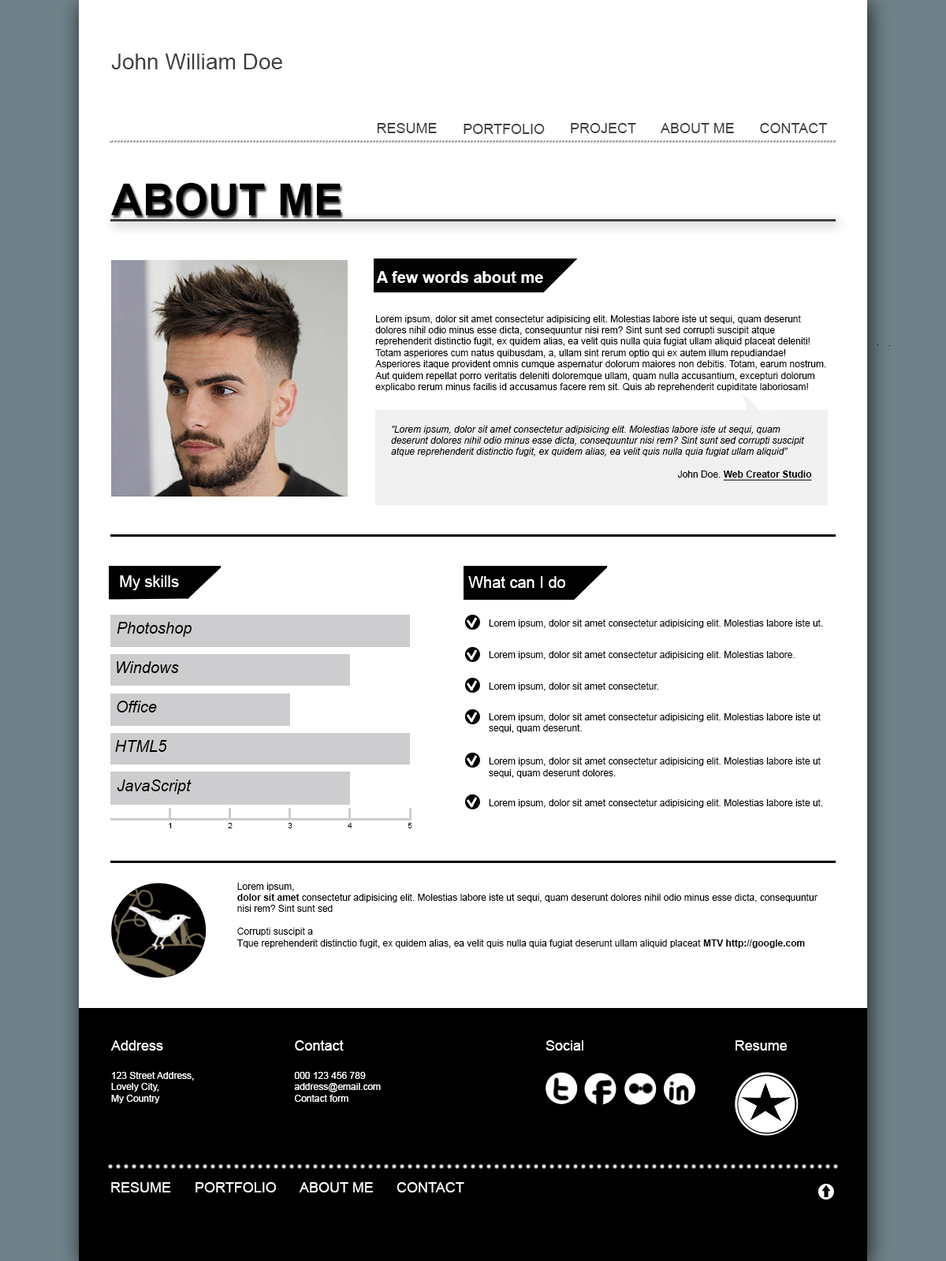
<style>
.page{position:relative;width:946px;height:1261px;background:#ffffff}
.page>*{position:absolute;margin:0}
.t1{font:22.1px "ArialMT";color:#3f3f3f}
.t2{font:14.2px "ArialMT";color:#3f3f3f}
.t3{font:43.3px "Arial-BoldMT";color:#000000}
.t4{font:15.8px "Arial-BoldMT";color:#ffffff}
.t5{font:9.5px "ArialMT";color:#000000}
.t6{font:9.5px "Arial-ItalicMT";color:#000000}
.t7{font:9.5px "Arial-BoldMT";color:#000000;text-decoration:underline}
.t8{font:15.8px "ArialMT";color:#ffffff}
.t9{font:15.8px "Arial-ItalicMT";color:#000000}
.t10{font:7.9px "ArialMT";color:#000000}
.t11{font:9.5px "Arial-BoldMT";color:#000000}
.t12{font:9.5px "ArialMT";color:#ffffff}
.t13{font:14.2px "ArialMT";color:#ffffff}
</style>
<div class="page">
<p class="t1" style="left:111px;top:54px;width:171px;height:15px">John William Doe</p>
<p class="t2" style="left:377px;top:123px;width:60px;height:10px">RESUME</p>
<p class="t2" style="left:463px;top:124px;width:82px;height:10px">PORTFOLIO</p>
<p class="t2" style="left:571px;top:123px;width:65px;height:10px">PROJECT</p>
<p class="t2" style="left:660px;top:123px;width:74px;height:10px">ABOUT ME</p>
<p class="t2" style="left:760px;top:123px;width:67px;height:10px">CONTACT</p>
<p class="t3" style="left:111px;top:183px;width:229px;height:33px">ABOUT ME</p>
<p class="t4" style="left:376px;top:271px;width:167px;height:12px">A few words about me</p>
<p class="t5" style="left:375px;top:315px;width:451px;height:77px">Lorem ipsum, dolor sit amet consectetur adipisicing elit. Molestias labore iste ut sequi, quam deserunt dolores nihil odio minus esse dicta, consequuntur nisi rem? Sint sunt sed corrupti suscipit atque reprehenderit distinctio fugit, ex quidem alias, ea velit quis nulla quia fugiat ullam aliquid placeat deleniti! Totam asperiores cum natus quibusdam, a, ullam sint rerum optio qui ex autem illum repudiandae! Asperiores itaque provident omnis cumque aspernatur dolorum maiores non debitis. Totam, earum nostrum. Aut quidem repellat porro veritatis deleniti doloremque ullam, quam nulla accusantium, excepturi dolorum explicabo rerum minus facilis id accusamus facere rem sit. Quis ab reprehenderit cupiditate laboriosam!</p>
<p class="t6" style="left:391px;top:426px;width:421px;height:55px">“Lorem ipsum, dolor sit amet consectetur adipisicing elit. Molestias labore iste ut sequi, quam deserunt dolores nihil odio minus esse dicta, consequuntur nisi rem? Sint sunt sed corrupti suscipit atque reprehenderit distinctio fugit, ex quidem alias, ea velit quis nulla quia fugiat ullam aliquid”<br><span class="t5"><br>John Doe. </span><span class="t7">Web Creator Studio</span></p>
<p class="t8" style="left:120px;top:575px;width:59px;height:15px">My skills</p>
<p class="t8" style="left:468px;top:576px;width:97px;height:12px">What can I do</p>
<p class="t9" style="left:117px;top:622px;width:75px;height:15px">Photoshop</p>
<p class="t5" style="left:489px;top:619px;width:334px;height:9px">Lorem ipsum, dolor sit amet consectetur adipisicing elit. Molestias labore iste ut.</p>
<p class="t5" style="left:489px;top:651px;width:305px;height:9px">Lorem ipsum, dolor sit amet consectetur adipisicing elit. Molestias labore.</p>
<p class="t9" style="left:117px;top:661px;width:62px;height:12px">Windows</p>
<p class="t5" style="left:489px;top:682px;width:170px;height:9px">Lorem ipsum, dolor sit amet consectetur.</p>
<p class="t9" style="left:117px;top:701px;width:40px;height:11px">Office</p>
<p class="t5" style="left:489px;top:713px;width:331px;height:20px">Lorem ipsum, dolor sit amet consectetur adipisicing elit. Molestias labore iste ut sequi, quam deserunt.</p>
<p class="t9" style="left:115px;top:740px;width:52px;height:12px">HTML5</p>
<p class="t5" style="left:489px;top:757px;width:331px;height:21px">Lorem ipsum, dolor sit amet consectetur adipisicing elit. Molestias labore iste ut sequi, quam deserunt dolores.</p>
<p class="t9" style="left:117px;top:779px;width:75px;height:15px">JavaScript</p>
<p class="t5" style="left:489px;top:799px;width:334px;height:9px">Lorem ipsum, dolor sit amet consectetur adipisicing elit. Molestias labore iste ut.</p>
<p class="t10" style="left:169px;top:823px;width:3px;height:5px">1</p>
<p class="t10" style="left:228px;top:823px;width:4px;height:5px">2</p>
<p class="t10" style="left:288px;top:823px;width:4px;height:5px">3</p>
<p class="t10" style="left:348px;top:823px;width:4px;height:5px">4</p>
<p class="t10" style="left:407px;top:823px;width:5px;height:5px">5</p>
<p class="t5" style="left:236px;top:883px;width:581px;height:65px">Lorem ipsum, <br><span class="t11">dolor sit amet </span>consectetur adipisicing elit. Molestias labore iste ut sequi, quam deserunt dolores nihil odio minus esse dicta, consequuntur nisi rem? Sint sunt sed <br><br>Corrupti suscipit a<br>Tque reprehenderit distinctio fugit, ex quidem alias, ea velit quis nulla quia fugiat deserunt ullam aliquid placeat <span class="t11">MTV http://google.com</span></p>
<p class="t12" style="left:110px;top:1040px;width:84px;height:63px"><span class="t13">Address<br><br></span>123 Street Address,<br>Lovely City,<br>My Country</p>
<p class="t12" style="left:294px;top:1040px;width:87px;height:62px"><span class="t13">Contact<br><br></span>000 123 456 789<br>address@email.com<br>Contact form</p>
<p class="t13" style="left:545px;top:1040px;width:38px;height:11px">Social</p>
<p class="t13" style="left:735px;top:1040px;width:52px;height:11px">Resume</p>
<p class="t13" style="left:111px;top:1182px;width:60px;height:10px">RESUME</p>
<p class="t13" style="left:195px;top:1182px;width:81px;height:10px">PORTFOLIO</p>
<p class="t13" style="left:299px;top:1182px;width:74px;height:10px">ABOUT ME</p>
<p class="t13" style="left:396px;top:1182px;width:68px;height:10px">CONTACT</p>
</div>
